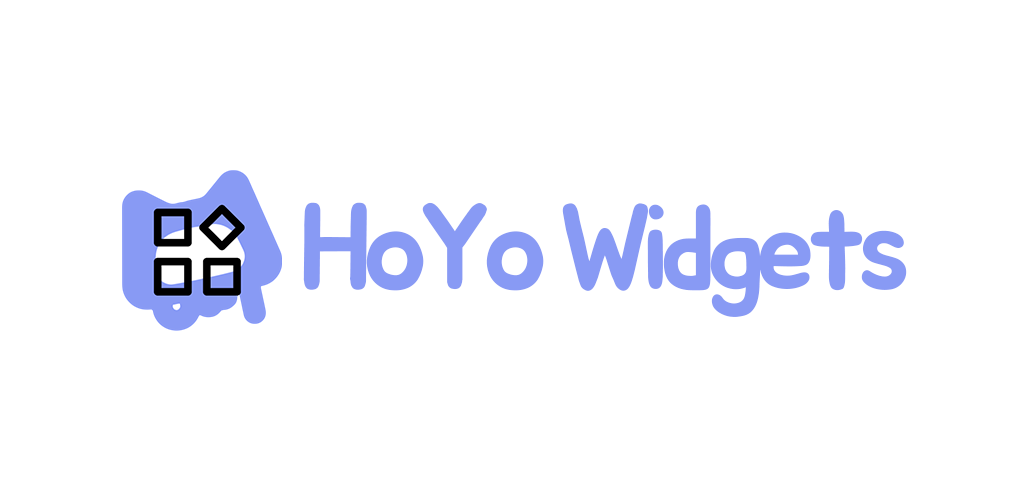
<style>
.page{position:relative;width:1024px;height:500px;background:#ffffff}
.page>*{position:absolute;margin:0}
.t1{font:120.6px "BMJUA";letter-spacing:-0.08em;color:#889af4}
</style>
<div class="page">
<p class="t1" style="left:303px;top:202px;width:604px;height:115px">HoYo Widgets</p>
</div>
